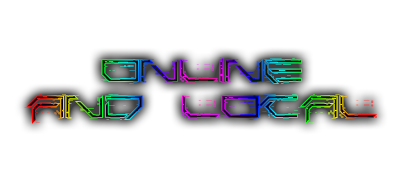
<style>
.page{position:relative;width:404px;height:182px;background:#ffffff}
.page>*{position:absolute;margin:0}
.t1{font:30px "Corruptor-LDR"}
</style>
<div class="page">
<p class="t1" style="left:24px;top:57px;width:353px;height:67px;text-align:center">ONLINE<br>AND LOCAL</p>
</div>
